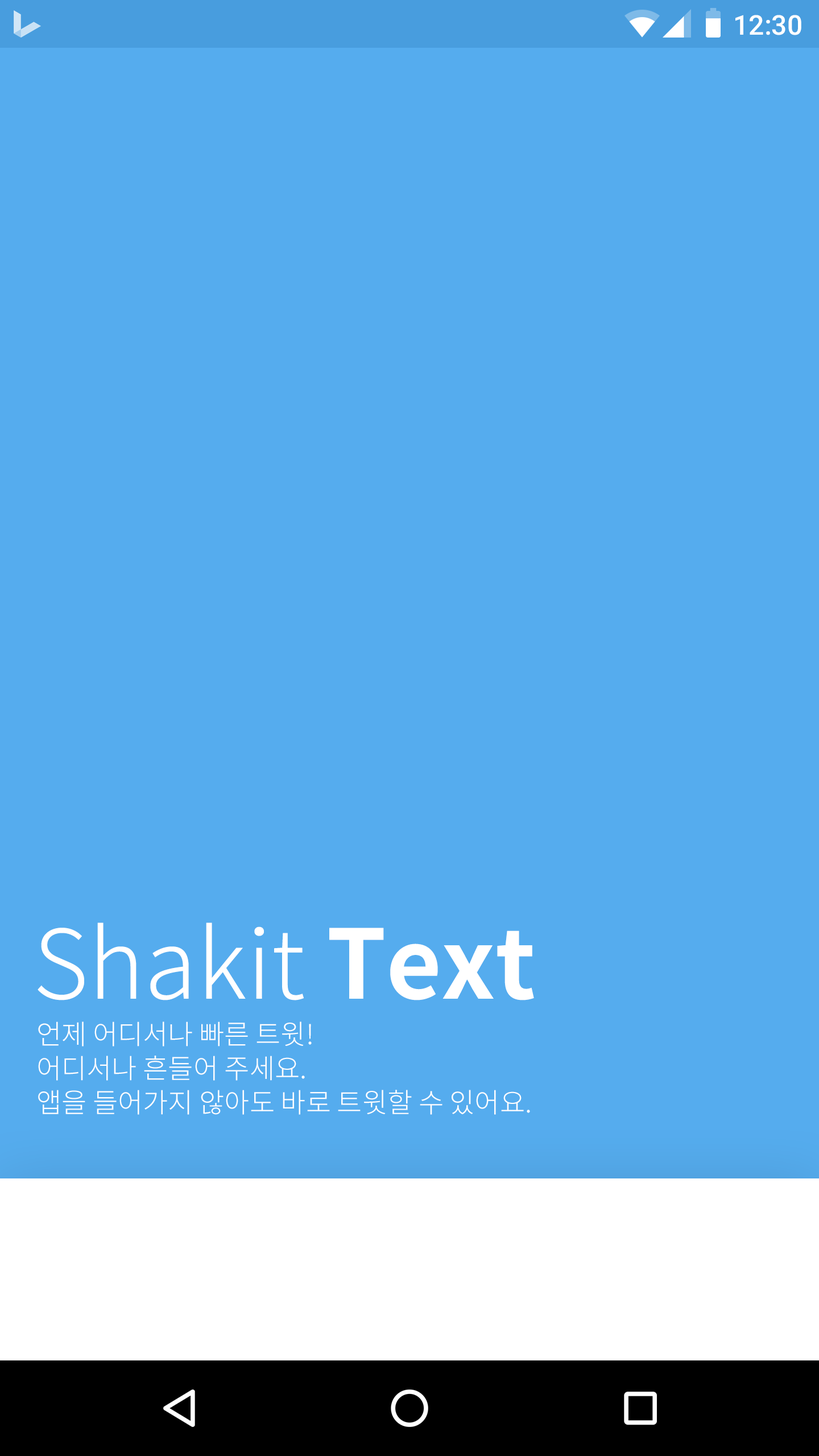
<style>
.page{position:relative;width:819px;height:1456px;background:#55acee}
.page>*{position:absolute;margin:0}
.t1{font:27.3px "Roboto-Medium";color:#ffffff}
.t2{font:95.5px "NotoSansCJKkr-Light";color:#ffffff}
.t3{font:95.5px "NotoSansCJKkr-Bold";color:#ffffff}
.t4{font:27.3px/34.1px "NotoSansCJKkr-Light";color:#ffffff}
</style>
<div class="page">
<p class="t1" style="left:735px;top:15px;width:66px;height:20px">12:30</p>
<p class="t2" style="left:38px;top:923px;width:496px;height:77px">Shakit <span class="t3">Text</span></p>
<p class="t4" style="left:38px;top:1021px;width:492px;height:94px">언제 어디서나 빠른 트윗! <br>어디서나 흔들어 주세요. <br>앱을 들어가지 않아도 바로 트윗할 수 있어요.</p>
</div>
